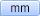
<style>
.page{position:relative;width:40px;height:16px}
.page>*{position:absolute;margin:0}
.t1{font:12px "ArialMT";color:#000000;scale:0.97 1}
</style>
<div class="page">
<p class="t1" style="left:11px;top:5px;width:18px;height:7px">mm</p>
</div>
